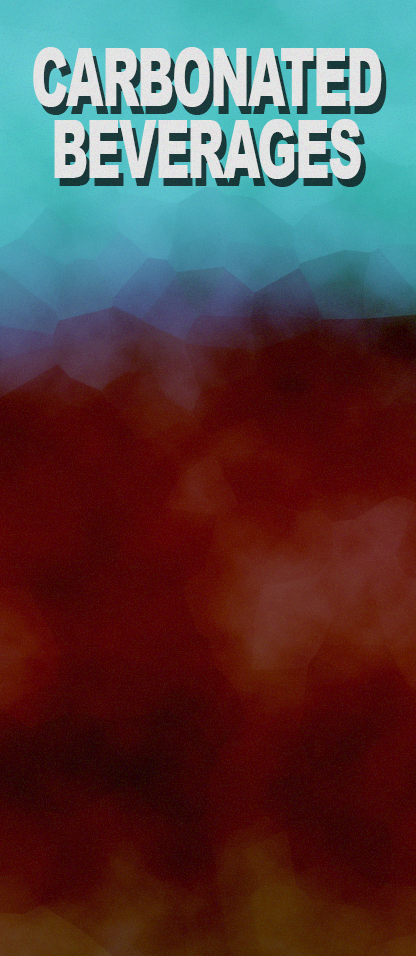
<style>
.page{position:relative;width:416px;height:956px}
.page>*{position:absolute;margin:0}
.t1{font:80.6px/72.5px "Arial-Black";letter-spacing:-0.04em;color:#e7e7e7;scale:0.6 1}
</style>
<div class="page">
<p class="t1" style="left:33px;top:47px;width:349px;height:132px;text-align:center">CARBONATED<br>BEVERAGES</p>
</div>
